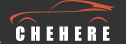
<style>
.page{position:relative;width:126px;height:44px;background:#333333}
.page>*{position:absolute;margin:0}
.t1{font:18px "Impact";letter-spacing:0.3em;color:#ffffff}
</style>
<div class="page">
<p class="t1" style="left:16px;top:26px;width:94px;height:15px">CHEHERE</p>
</div>
